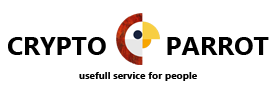
<style>
.page{position:relative;width:272px;height:90px;background:#ffffff}
.page>*{position:absolute;margin:0}
.t1{font:26px "MicrosoftNewTaiLue-Bold";color:#000000}
.t2{font:26px "Ebrima-Bold";color:#000000}
.t3{font:10px "MicrosoftNewTaiLue-Bold";color:#000000}
</style>
<div class="page">
<p class="t1" style="left:8px;top:37px;width:98px;height:18px">CRYPTO</p>
<p class="t2" style="left:167px;top:37px;width:102px;height:18px">PARROT</p>
<p class="t3" style="left:79px;top:72px;width:118px;height:9px">usefull service for people</p>
</div>
